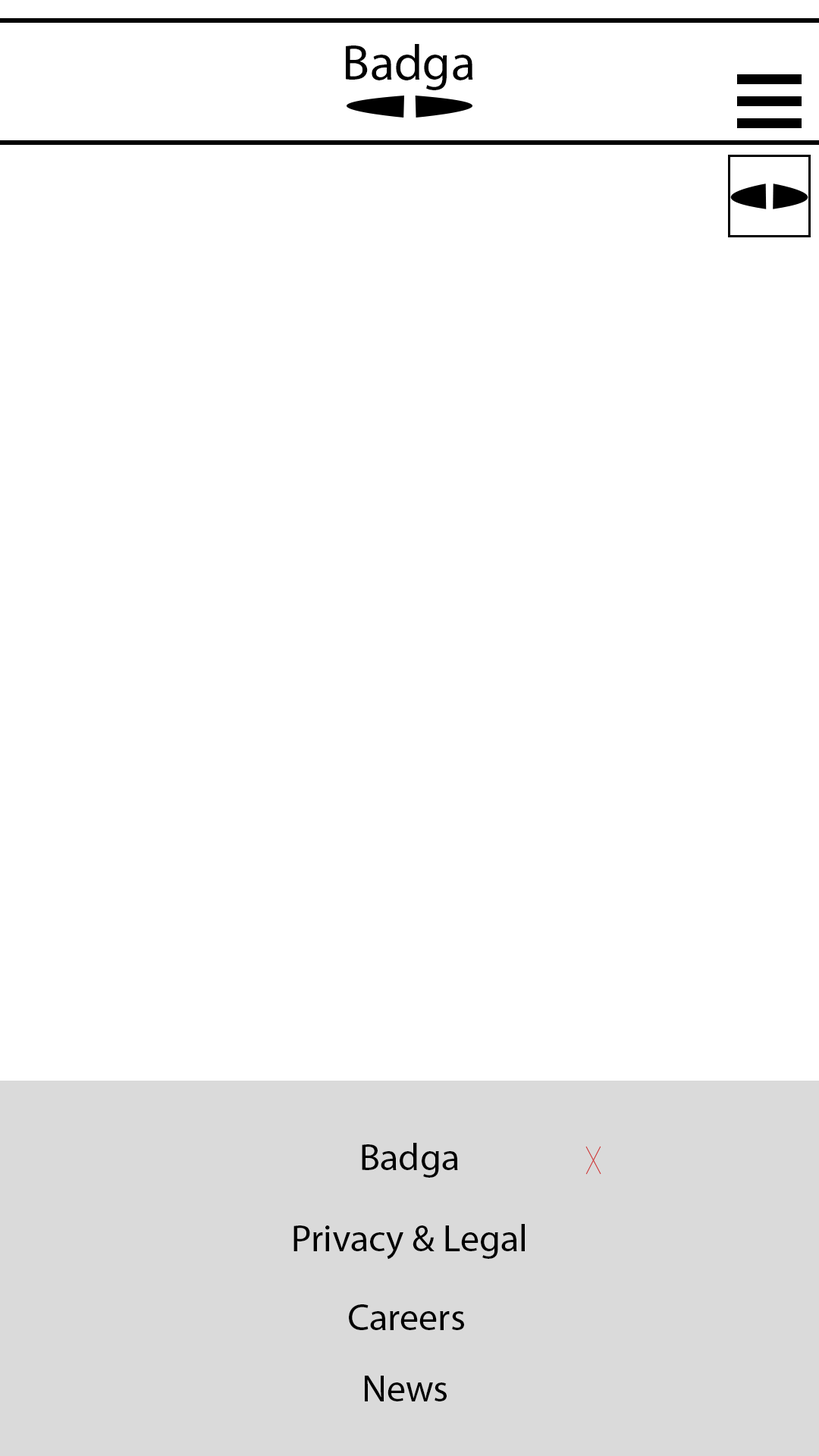
<style>
.page{position:relative;width:819px;height:1456px;background:#ffffff}
.page>*{position:absolute;margin:0}
.t1{font:50.6px "MyriadPro-Regular";color:#000000}
.t2{font:37.9px "MyriadPro-Regular";color:#000000}
</style>
<div class="page">
<p class="t1" style="left:346px;top:44px;width:127px;height:46px">Badga</p>
<p class="t2" style="left:362px;top:1143px;width:96px;height:35px">Badga</p>
<p class="t2" style="left:293px;top:1224px;width:232px;height:36px">Privacy &amp; Legal</p>
<p class="t2" style="left:349px;top:1304px;width:115px;height:26px">Careers</p>
<p class="t2" style="left:365px;top:1376px;width:82px;height:25px">News</p>
</div>
